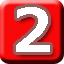
<style>
.page{position:relative;width:64px;height:64px;background:#f70909}
.page>*{position:absolute;margin:0}
.t1{font:60px "Meiryo-Bold";color:#ffffff}
</style>
<div class="page">
<p class="t1" style="left:16px;top:7px;width:34px;height:45px">2</p>
</div>
